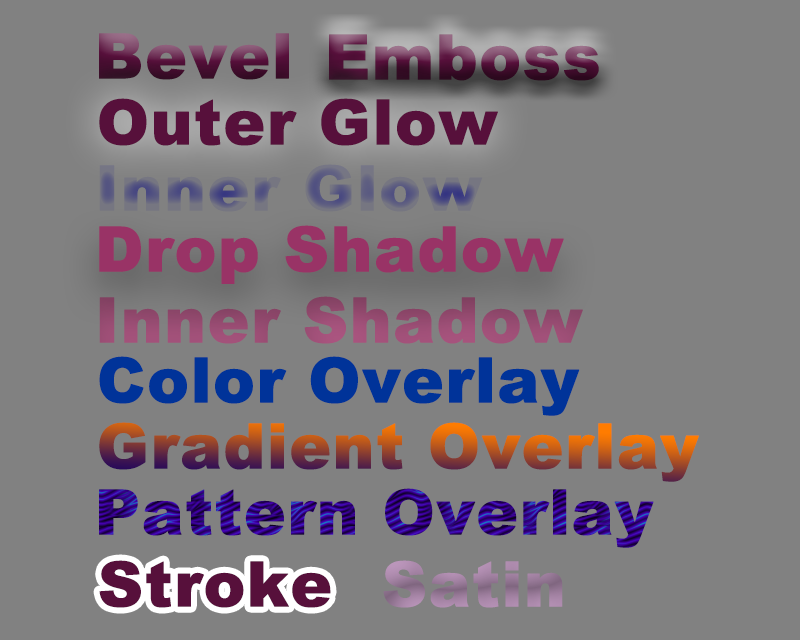
<style>
.page{position:relative;width:800px;height:640px;background:#818181}
.page>*{position:absolute;margin:0}
.t1{font:62.5px "Arial-Black";font-weight:bold}
.t2{font:62.5px "Arial-Black";color:#57103b;font-weight:bold}
.t3{font:62.5px "Arial-Black";color:#656581;font-weight:bold}
.t4{font:62.5px "Arial-Black";color:#993366;font-weight:bold}
.t5{font:62.5px "Arial-Black";color:#994c73;font-weight:bold}
.t6{font:62.5px "Arial-Black";color:#003399;font-weight:bold}
.t7{font:62.5px "Arial-Black";color:#9f7f9f;font-weight:bold}
</style>
<div class="page">
<p class="t1" style="left:99px;top:33px;width:190px;height:47px">Bevel</p>
<p class="t1" style="left:329px;top:34px;width:270px;height:47px">Emboss</p>
<p class="t2" style="left:99px;top:98px;width:399px;height:48px">Outer Glow</p>
<p class="t3" style="left:99px;top:164px;width:384px;height:48px">Inner Glow</p>
<p class="t4" style="left:99px;top:225px;width:465px;height:59px">Drop Shadow</p>
<p class="t5" style="left:99px;top:296px;width:484px;height:48px">Inner Shadow</p>
<p class="t6" style="left:99px;top:356px;width:481px;height:60px">Color Overlay</p>
<p class="t1" style="left:99px;top:422px;width:600px;height:60px">Gradient Overlay</p>
<p class="t1" style="left:99px;top:488px;width:555px;height:60px">Pattern Overlay</p>
<p class="t2" style="left:99px;top:560px;width:232px;height:48px">Stroke</p>
<p class="t7" style="left:383px;top:560px;width:180px;height:48px">Satin</p>
</div>
